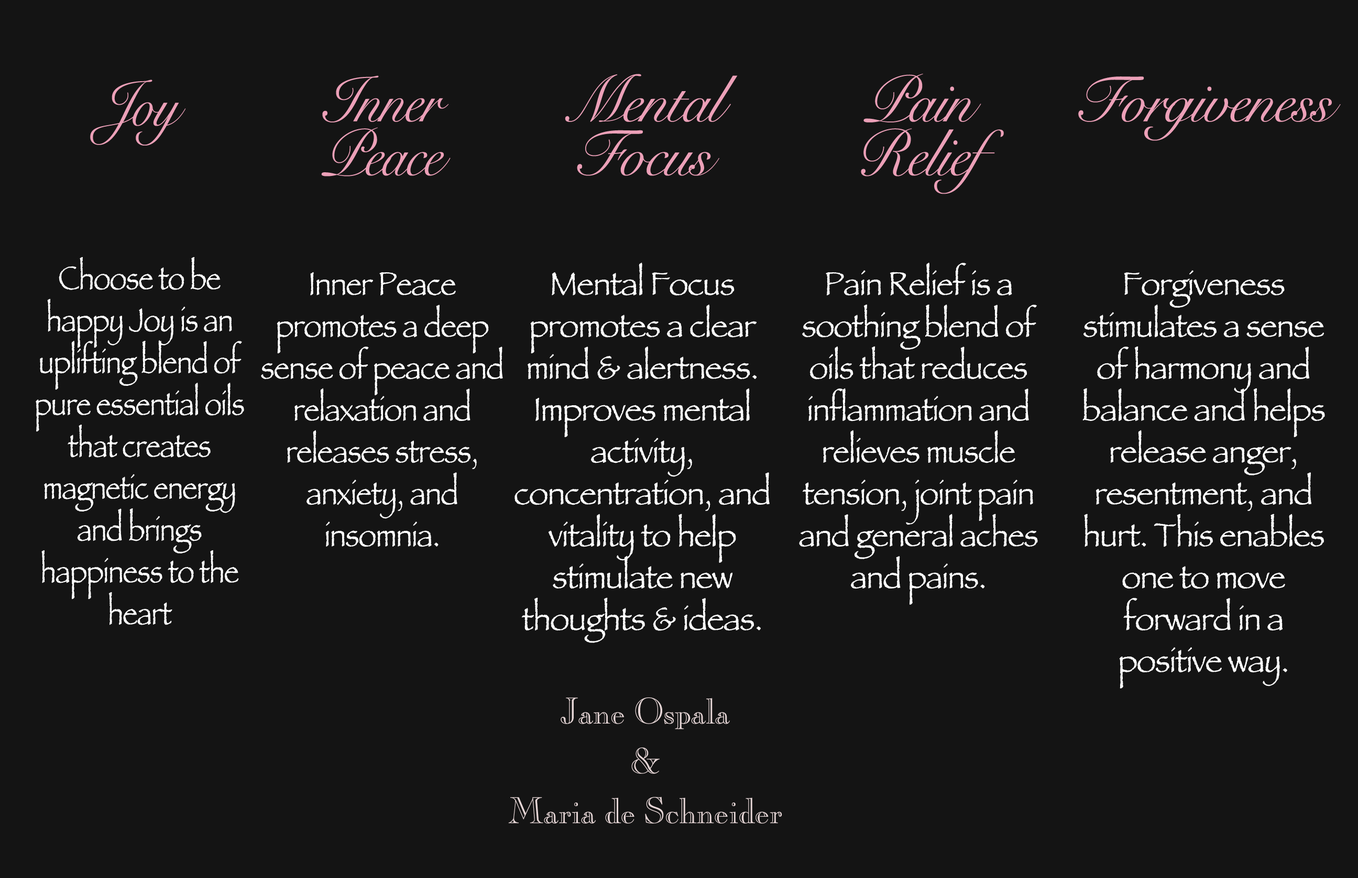
<style>
.page{position:relative;width:1358px;height:878px;background:#141414}
.page>*{position:absolute;margin:0}
.t1{font:34px/41.9px "Papyrus";letter-spacing:-0.025em;color:#ffffff;scale:0.87 1}
.t2{font:65.5px/6px "SnellRoundhand-Script";letter-spacing:-0.025em;color:#eca0b8;scale:0.87 1}
.t3{font:34px/41.9px "Papyrus";letter-spacing:-0.025em;color:#ffffff;scale:0.94 1}
.t4{font:65.5px/6px "SnellRoundhand-Script";letter-spacing:-0.025em;color:#eca0b8;scale:0.94 1}
.t5{font:34px/41.9px "Papyrus";letter-spacing:-0.025em;color:#ffffff;scale:0.92 1}
.t6{font:65.5px/6px "SnellRoundhand-Script";letter-spacing:-0.025em;color:#eca0b8;scale:0.92 1}
.t7{font:34px/41.9px "Papyrus";letter-spacing:-0.025em;color:#ffffff;scale:0.83 1}
.t8{font:65.5px/6px "SnellRoundhand-Script";letter-spacing:-0.025em;color:#eca0b8;scale:0.83 1}
.t9{font:36.7px/24.9px "CaslonOpenFace";letter-spacing:-0.025em;color:#e6d6d6}
</style>
<div class="page">
<p class="t1" style="left:261px;top:75px;width:242px;height:472px;text-align:center"><span class="t2">Inner <br><br><br><br><br><br><br><br><br>Peace<br><br><br><br><br><br><br><br><br><br><br><br><br><br></span>Inner Peace promotes a deep sense of peace and relaxation and releases stress, anxiety, and insomnia.</p>
<p class="t3" style="left:514px;top:74px;width:255px;height:569px;text-align:center"><span class="t4">Mental <br><br><br><br><br><br><br><br><br>Focus<br><br><br><br><br><br><br><br><br><br><br><br><br><br></span>Mental Focus promotes a clear mind &amp; alertness.  Improves mental activity, concentration, and vitality to help stimulate new thoughts &amp; ideas.</p>
<p class="t5" style="left:799px;top:73px;width:239px;height:532px;text-align:center"><span class="t6">Pain <br><br><br><br><br><br><br><br><br>Relief<br><br><br><br><br><br><br><br><br><br><br><br><br><br></span>Pain Relief is a soothing blend of oils that reduces inflammation and relieves muscle tension, joint pain and general aches and pains.</p>
<p class="t3" style="left:1078px;top:76px;width:262px;height:613px;text-align:center"><span class="t4">Forgiveness<br><br><br><br><br><br><br><br><br><br><br><br><br><br><br><br><br><br><br><br><br><br><br></span>Forgiveness stimulates a sense of harmony and balance and helps release anger, resentment, and hurt. This enables one to move forward in a positive way.</p>
<p class="t7" style="left:36px;top:80px;width:208px;height:545px;text-align:center"><span class="t8">Joy<br><br><br><br><br><br><br><br><br><br><br><br><br><br><br><br><br><br></span>Choose to be happy Joy is an uplifting blend of pure essential oils that creates magnetic energy and brings happiness to the heart</p>
<p class="t9" style="left:508px;top:698px;width:274px;height:126px;text-align:center">Jane Ospala<br><br>&amp;<br><br>Maria de Schneider</p>
</div>
